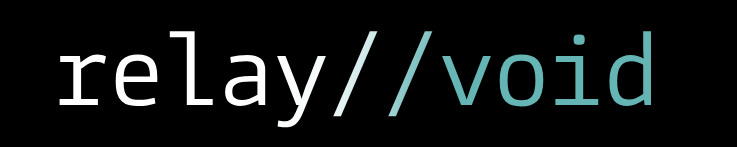
<style>
.page{position:relative;width:737px;height:147px;background:#000000}
.page>*{position:absolute;margin:0}
.t1{font:100px "CamingoCode-Regular"}
</style>
<div class="page">
<p class="t1" style="left:59px;top:31px;width:592px;height:97px">relay//void</p>
</div>
